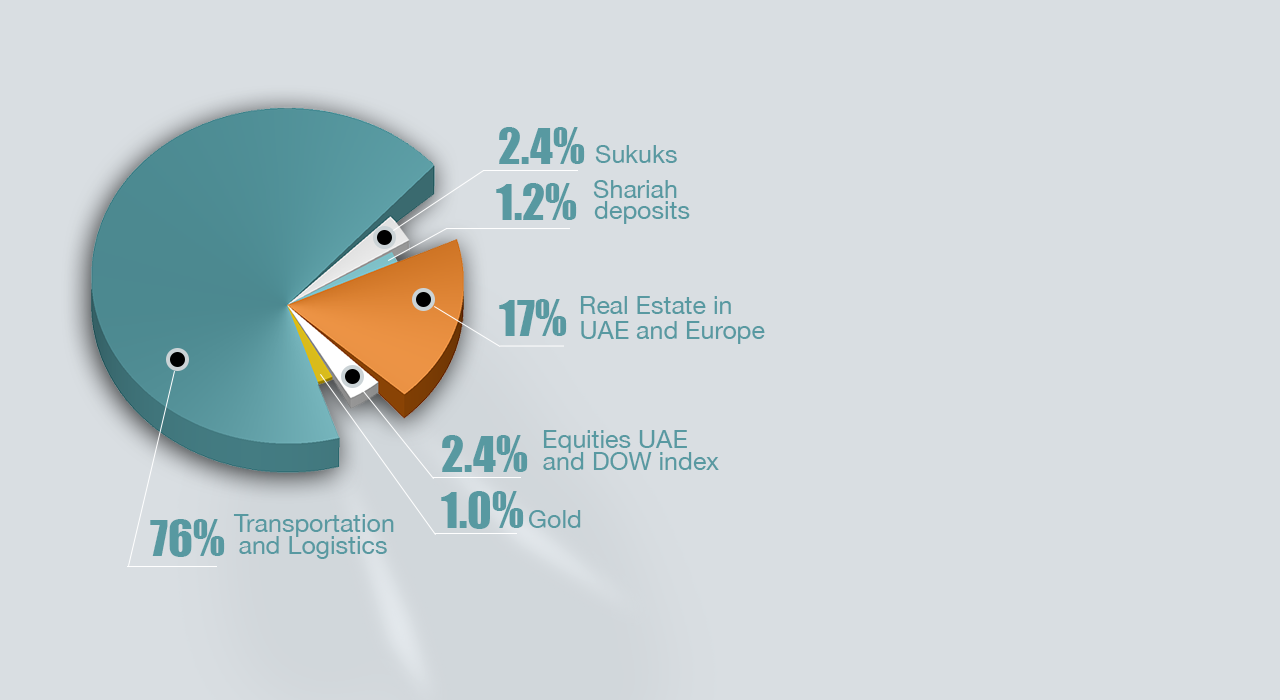
<style>
.page{position:relative;width:1280px;height:700px;background:#d9dee2}
.page>*{position:absolute;margin:0}
.t1{font:45.8px "Impact";color:#5899a1}
.t2{font:25px "HelveticaNeue";color:#5899a1}
</style>
<div class="page">
<p class="t1" style="left:499px;top:127px;width:86px;height:37px">2.4%</p>
<p class="t2" style="left:595px;top:145px;width:82px;height:18px">Sukuks</p>
<p class="t1" style="left:496px;top:183px;width:81px;height:37px">1.2%</p>
<p class="t2" style="left:593px;top:180px;width:84px;height:18px">Shariah</p>
<p class="t2" style="left:594px;top:201px;width:96px;height:23px">deposits</p>
<p class="t1" style="left:499px;top:299px;width:68px;height:37px">17%</p>
<p class="t2" style="left:580px;top:296px;width:151px;height:18px">Real Estate in</p>
<p class="t2" style="left:581px;top:321px;width:184px;height:23px">UAE and Europe</p>
<p class="t1" style="left:442px;top:435px;width:86px;height:37px">2.4%</p>
<p class="t2" style="left:543px;top:430px;width:144px;height:23px">Equities UAE</p>
<p class="t2" style="left:543px;top:452px;width:176px;height:18px">and DOW index</p>
<p class="t1" style="left:441px;top:491px;width:83px;height:38px">1.0%</p>
<p class="t2" style="left:529px;top:510px;width:52px;height:18px">Gold</p>
<p class="t1" style="left:150px;top:519px;width:75px;height:38px">76%</p>
<p class="t2" style="left:233px;top:514px;width:161px;height:23px">Transportation</p>
<p class="t2" style="left:239px;top:536px;width:148px;height:23px">and Logistics</p>
</div>
